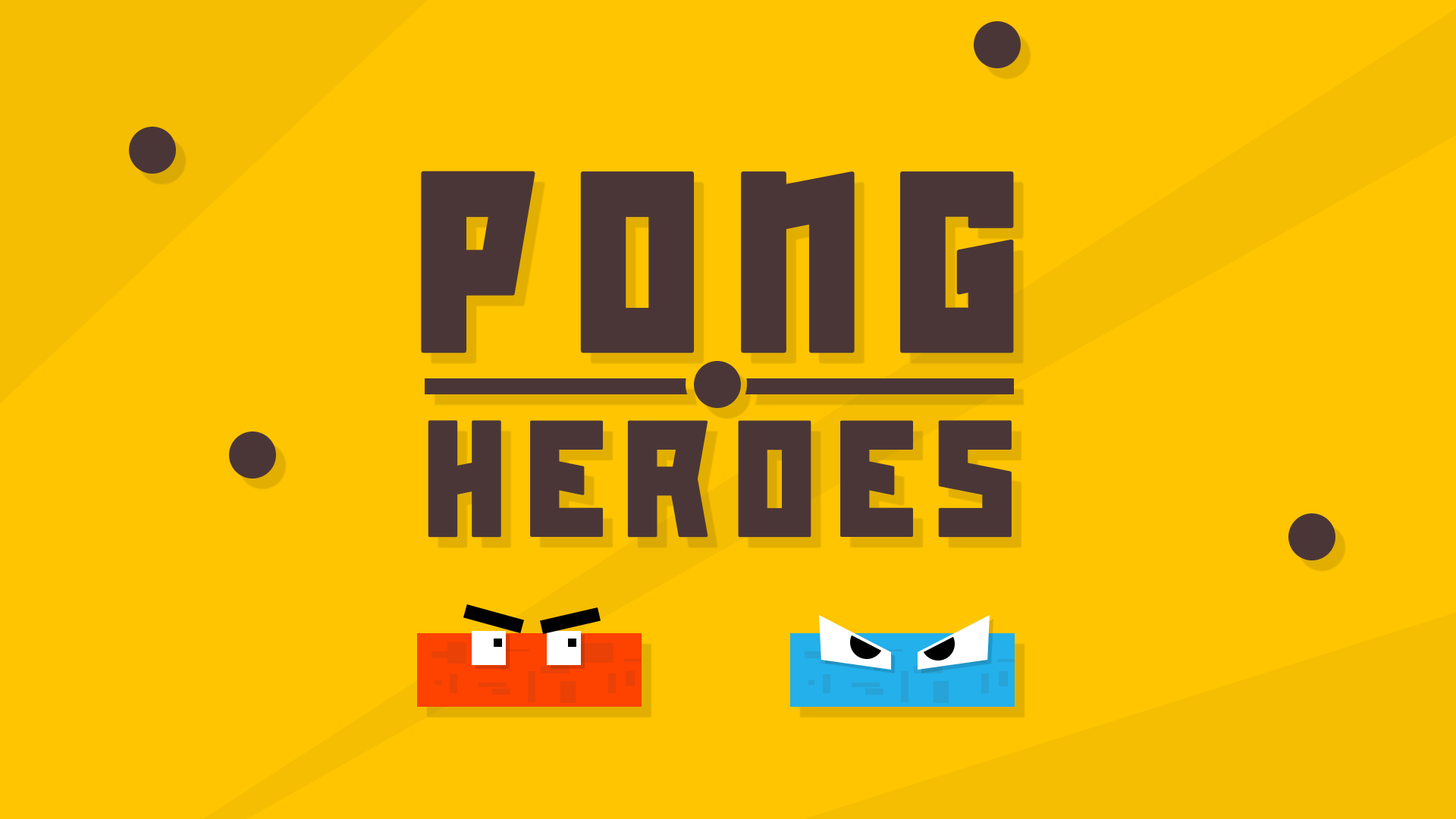
<style>
.page{position:relative;width:1456px;height:819px;background:#fec500}
.page>*{position:absolute;margin:0}
.t1{font:242.2px "Slash";letter-spacing:0.05em;color:#4b3637;text-transform:uppercase}
.t2{font:155.5px "Slash";letter-spacing:0.05em;color:#4b3637;text-transform:uppercase}
</style>
<div class="page">
<p class="t1" style="left:421px;top:171px;width:593px;height:182px">PONG</p>
<p class="t2" style="left:428px;top:420px;width:584px;height:118px">HEROES</p>
</div>
